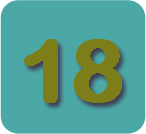
<style>
.page{position:relative;width:146px;height:134px;background:#4ca8a7}
.page>*{position:absolute;margin:0}
.t1{font:86.1px "ArialRoundedMTBold";letter-spacing:-0.01em;color:#7d7e1a;font-weight:bold}
</style>
<div class="page">
<p class="t1" style="left:24px;top:39px;width:98px;height:64px">18</p>
</div>
